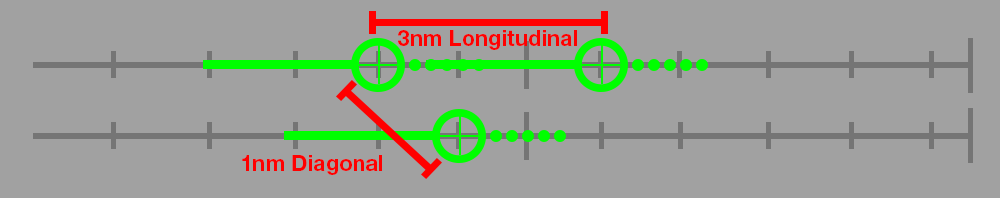
<style>
.page{position:relative;width:1000px;height:198px;background:#a1a1a1}
.page>*{position:absolute;margin:0}
.t1{font:21.9px "HelveticaNeueLTStd-Bd";color:#ff0000}
</style>
<div class="page">
<p class="t1" style="left:398px;top:30px;width:179px;height:20px">3nm Longitudinal</p>
<p class="t1" style="left:242px;top:155px;width:140px;height:20px">1nm Diagonal</p>
</div>
